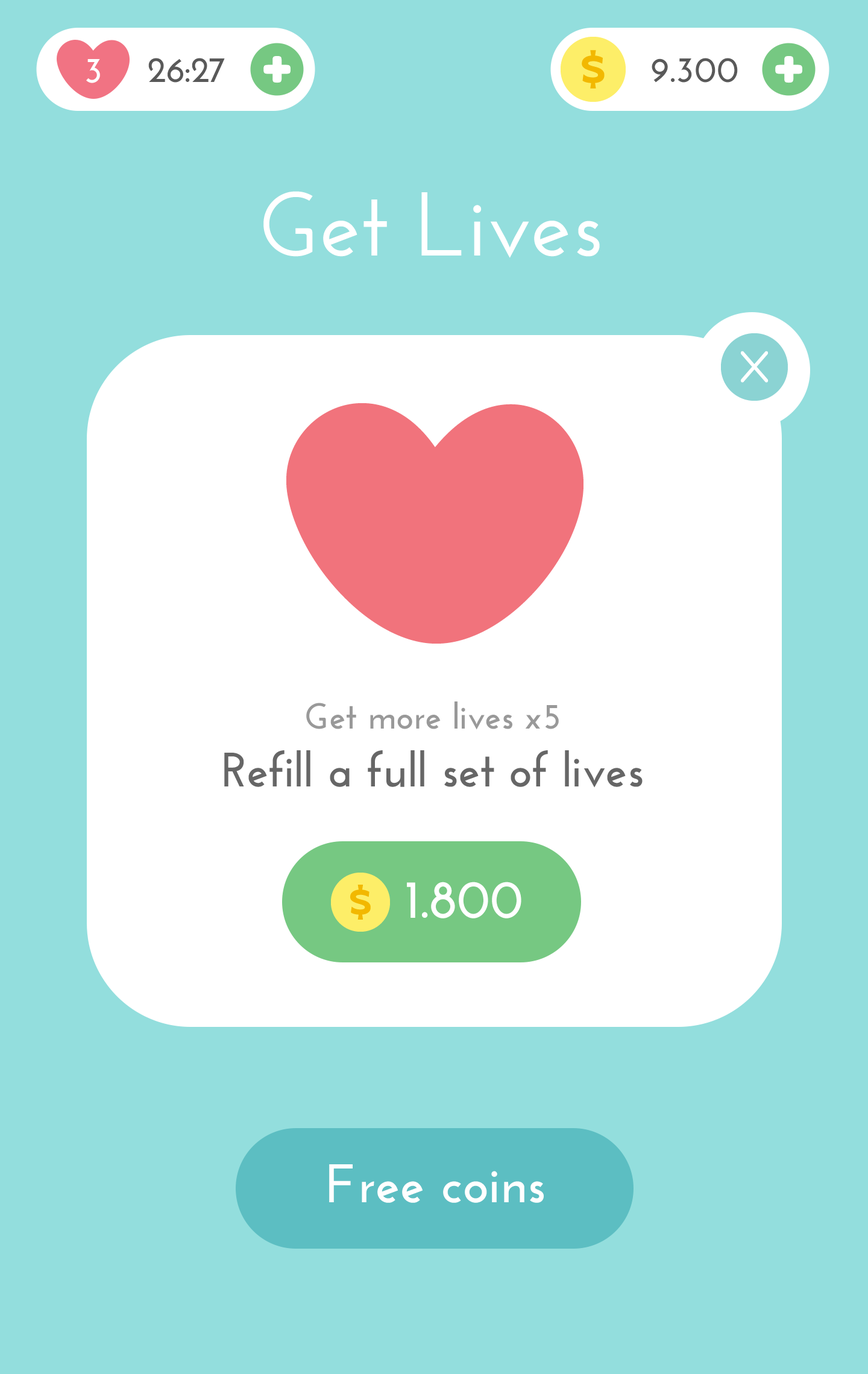
<style>
.page{position:relative;width:868px;height:1374px;background:#93dedd}
.page>*{position:absolute;margin:0}
.t1{font:36.2px "JosefinSans-Bold";color:#ffffff}
.t2{font:36.2px "JosefinSans-Bold";color:#595959}
.t3{font:90.4px "JosefinSans-SemiBold";color:#ffffff}
.t4{font:48.2px/57.9px "JosefinSans-Bold";color:#666666}
.t5{font:36.2px/43.4px "JosefinSans-Bold";color:#999999}
.t6{font:54.2px "JosefinSans-Bold";color:#ffffff}
</style>
<div class="page">
<p class="t1" style="left:86px;top:59px;width:14px;height:24px">3</p>
<p class="t2" style="left:148px;top:58px;width:77px;height:25px">26:27</p>
<p class="t2" style="left:651px;top:58px;width:87px;height:25px">9.300</p>
<p class="t3" style="left:263px;top:191px;width:337px;height:67px">Get Lives</p>
<p class="t4" style="left:224px;top:701px;width:418px;height:87px;text-align:center"><span class="t5">Get more lives x5<br></span>Refill a full set of lives</p>
<p class="t6" style="left:407px;top:882px;width:114px;height:36px">1.800</p>
<p class="t6" style="left:329px;top:1164px;width:215px;height:39px">Free coins</p>
</div>
